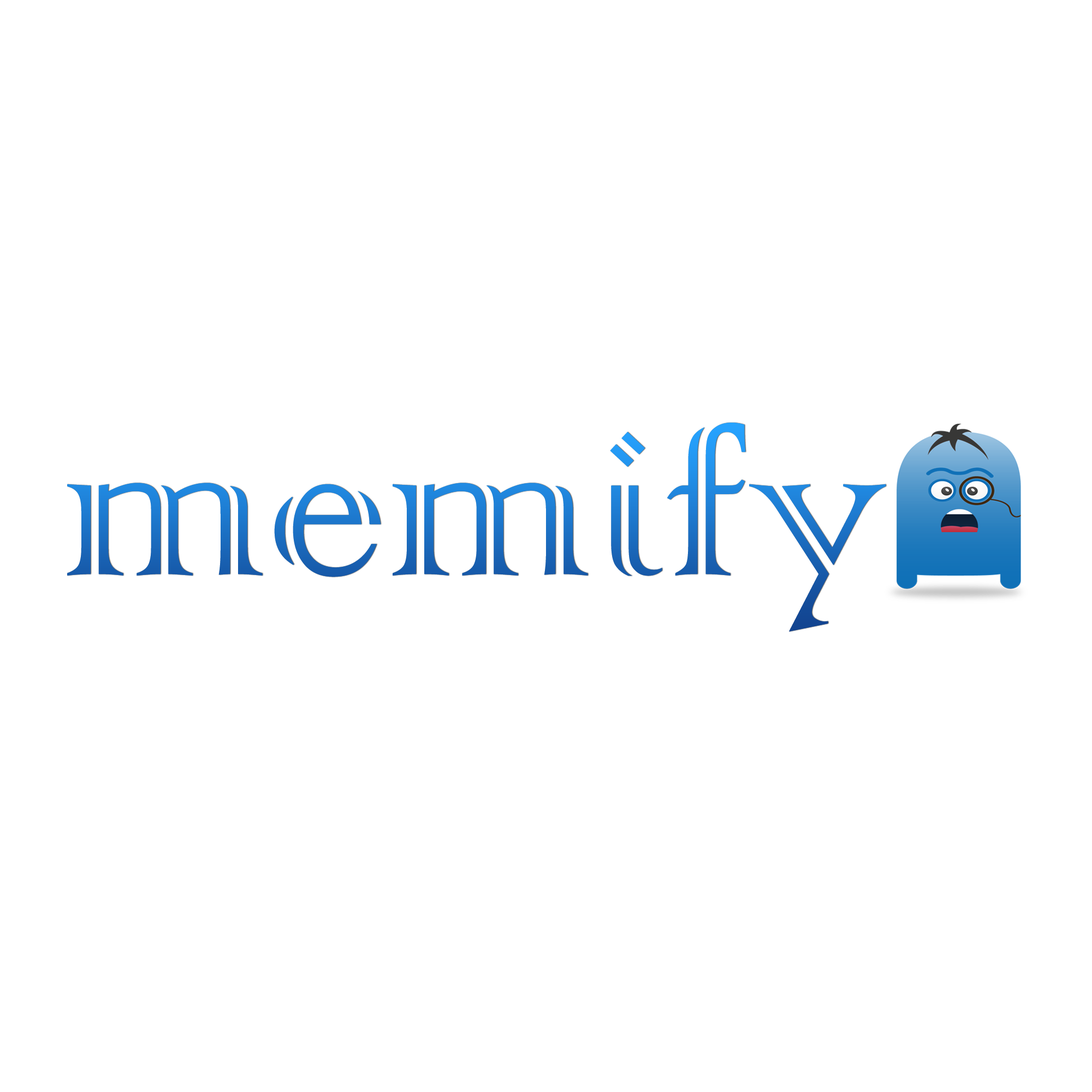
<style>
.page{position:relative;width:1092px;height:1092px;background:#ffffff}
.page>*{position:absolute;margin:0}
.t1{font:254px "ColonnaMT"}
</style>
<div class="page">
<p class="t1" style="left:67px;top:423px;width:819px;height:209px">memify</p>
</div>
